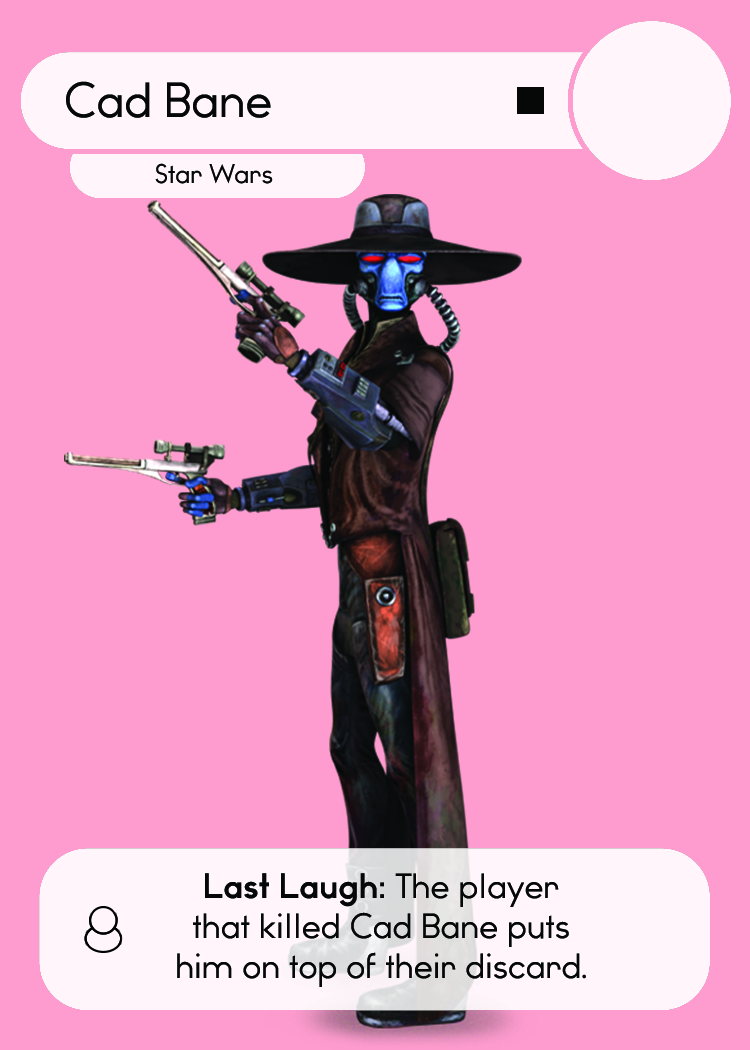
<style>
.page{position:relative;width:750px;height:1050px;background:#ff9ccf}
.page>*{position:absolute;margin:0}
.t1{font:46.7px "WatchwordRegularDemo";color:#060808}
.t2{font:25.5px "WatchwordRegularDemo";color:#060808}
.t3{font:33.3px "WatchwordRegularDemo";color:#060808}
.t4{font:33.3px "WatchwordBoldDemo";color:#060808}
.t5{font:33.3px "Dosis-Medium";color:#060808}
</style>
<div class="page">
<p class="t1" style="left:66px;top:81px;width:205px;height:37px">Cad Bane</p>
<p class="t2" style="left:155px;top:163px;width:118px;height:21px">Star Wars</p>
<p class="t3" style="left:177px;top:873px;width:409px;height:114px;text-align:center"><span class="t4">Last Laugh: </span>The player<br>that killed Cad Bane puts<br>him on top of their discard<span class="t5">.</span></p>
</div>
